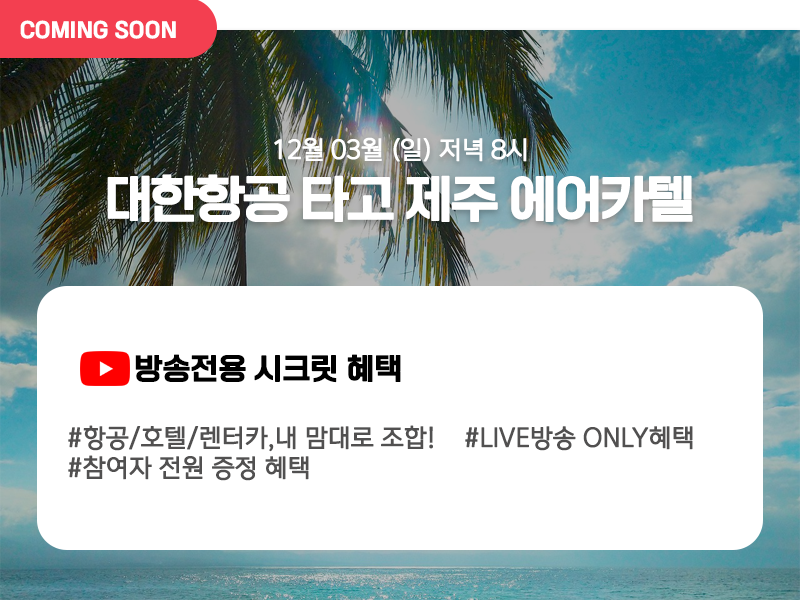
<style>
.page{position:relative;width:800px;height:600px;background:#ffffff}
.page>*{position:absolute;margin:0}
.t1{font:20.8px "ONEMobileTitleOTFRegular";color:#ffffff;font-weight:bold}
.t2{font:25px "ONEMobileOTFRegular";letter-spacing:-0.05em;color:#ffffff;font-weight:bold}
.t3{font:50px "ONEMobileTitleOTFRegular";letter-spacing:-0.05em;color:#ffffff;font-weight:bold}
.t4{font:29.2px "ONEMobileTitleOTFRegular";letter-spacing:-0.01em;color:#000000;font-weight:bold}
.t5{font:25px "ONEMobileOTFRegular";letter-spacing:-0.01em;color:#515050;font-weight:bold}
</style>
<div class="page">
<p class="t1" style="left:20px;top:20px;width:156px;height:19px">COMING SOON</p>
<p class="t2" style="left:274px;top:137px;width:253px;height:25px">12월 03월 (일) 저녁 8시</p>
<p class="t3" style="left:107px;top:174px;width:586px;height:48px">대한항공 타고 제주 에어카텔</p>
<p class="t4" style="left:135px;top:354px;width:266px;height:29px">방송전용 시크릿 혜택</p>
<p class="t5" style="left:68px;top:425px;width:625px;height:56px">#항공/호텔/렌터카,내 맘대로 조합!    #LIVE방송 ONLY혜택<br>#참여자 전원 증정 혜택</p>
</div>
